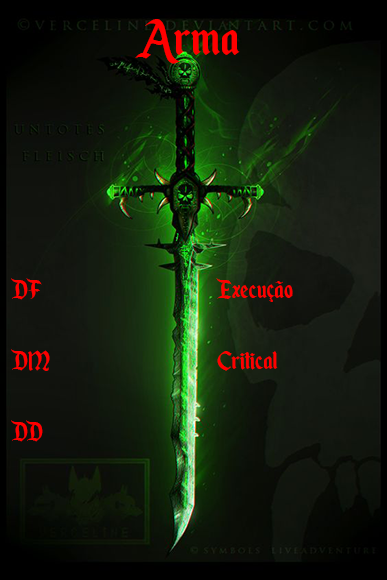
<style>
.page{position:relative;width:387px;height:580px}
.page>*{position:absolute;margin:0}
.t1{font:59.3px "EnchantedLand";color:#ff0000}
.t2{font:29.6px "EnchantedLand";color:#ff0000}
</style>
<div class="page">
<p class="t1" style="left:135px;top:19px;width:105px;height:45px">Arma</p>
<p class="t2" style="left:11px;top:278px;width:282px;height:164px">DF              Execução<br><br>DM             Critical<br><br>DD</p>
</div>
